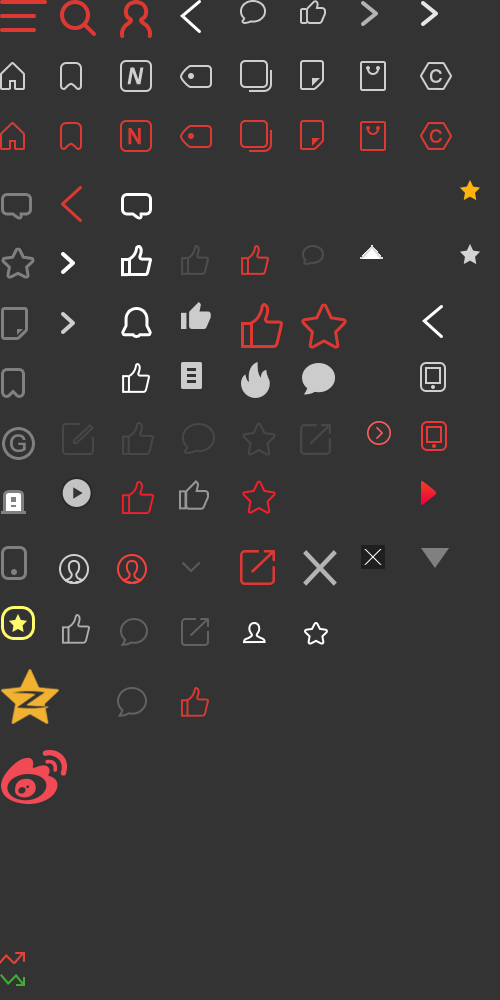
<style>
.page{position:relative;width:500px;height:1000px;background:#333333}
.page>*{position:absolute;margin:0}
.t1{font:22.9px "ABeeZee-Italic";letter-spacing:0.1em;color:#cfcfcf;font-weight:bold}
.t2{font:17.9px "PingFangSC-Medium";letter-spacing:-0.025em;color:#cfcfcf}
.t3{font:22.9px "MyriadPro-Regular";letter-spacing:0.1em;color:#dd3932;font-weight:bold}
.t4{font:17.9px "PingFangSC-Medium";letter-spacing:-0.025em;color:#dd3932}
.t5{font:24px "PingFangSC-Semibold";color:#808080}
</style>
<div class="page">
<p class="t1" style="left:127px;top:67px;width:17px;height:18px">N</p>
<p class="t2" style="left:430px;top:69px;width:12px;height:14px">C</p>
<p class="t3" style="left:128px;top:128px;width:13px;height:17px">N</p>
<p class="t4" style="left:430px;top:129px;width:12px;height:14px">C</p>
<p class="t5" style="left:10px;top:434px;width:16px;height:18px">G</p>
</div>
